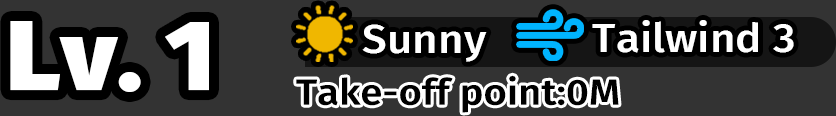
<style>
.page{position:relative;width:836px;height:116px;background:#333333}
.page>*{position:absolute;margin:0}
.t1{font:99px "FiraSans-Black";color:#ffffff;scale:1.07 1}
.t2{font:39.6px "FiraSans-Medium";color:#ffffff;scale:1.11 1}
.t3{font:36px "FiraSans-Medium";color:#000000;scale:1.11 1}
</style>
<div class="page">
<p class="t1" style="left:10px;top:21px;width:199px;height:71px">Lv. 1</p>
<p class="t2" style="left:362px;top:24px;width:125px;height:38px">Sunny</p>
<p class="t2" style="left:592px;top:20px;width:202px;height:33px">Tailwind 3</p>
<p class="t3" style="left:296px;top:75px;width:323px;height:38px">Take-off point:0M</p>
</div>
